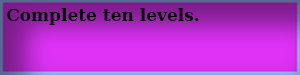
<style>
.page{position:relative;width:300px;height:75px}
.page>*{position:absolute;margin:0}
.t1{font:17px "DejaVuSerif-Bold";color:#000000}
</style>
<div class="page">
<p class="t1" style="left:7px;top:8px;width:192px;height:17px">Complete ten levels.</p>
</div>
